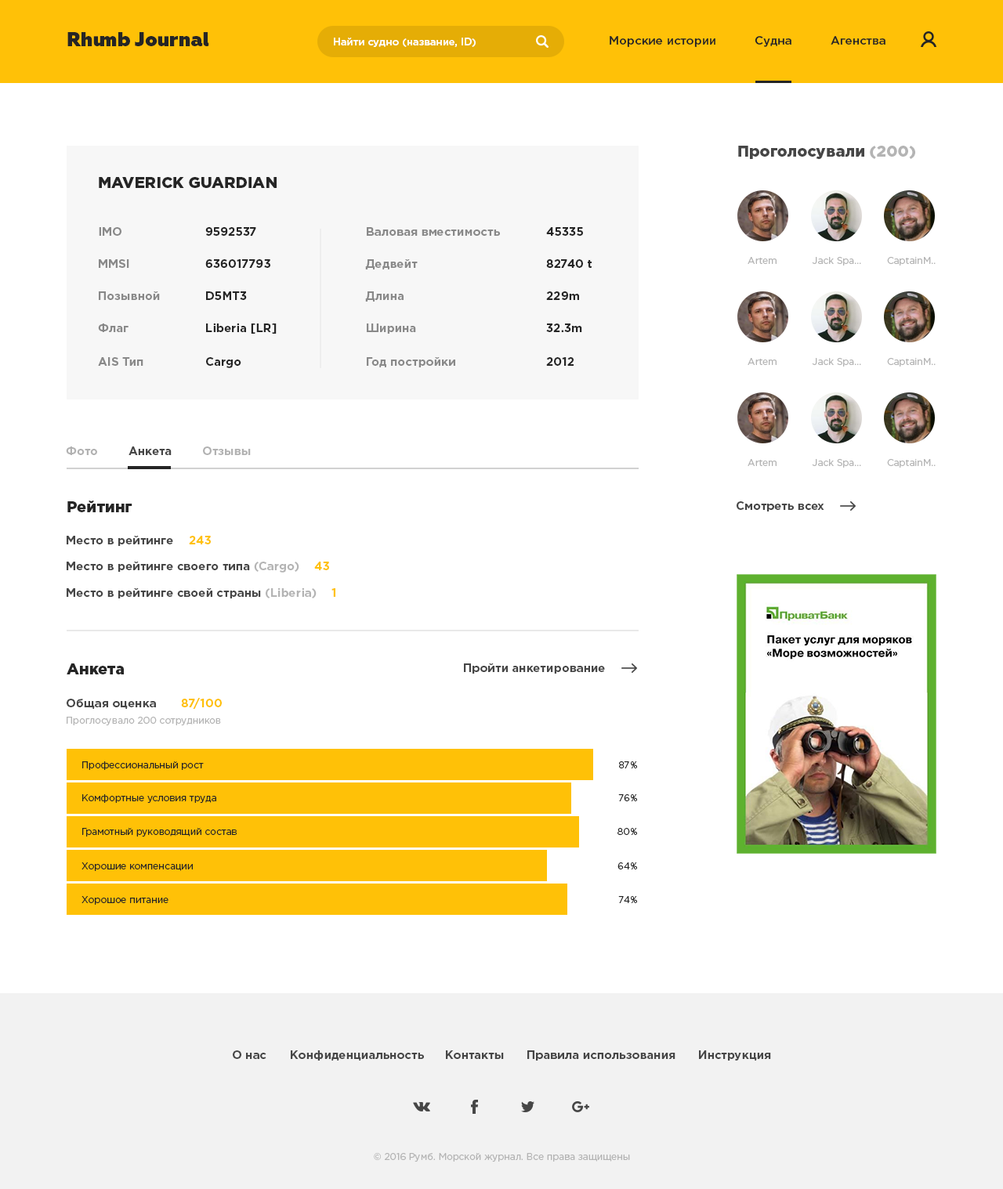
<style>
.page{position:relative;width:1003px;height:1189px;background:#ffffff}
.page>*{position:absolute;margin:0}
.t1{font:19.6px "Geometria-Heavy";color:#252525}
.t2{font:10.2px "GothamPro-Medium";color:#ffffff}
.t3{font:11.8px "GothamPro-Medium";color:#252525}
.t4{font:15.7px "GothamPro-Black";color:#464646}
.t5{font:15.7px "GothamPro-Black";color:#b4b4b4}
.t6{font:15.7px "GothamPro-Black";color:#252525}
.t7{font:11.8px "GothamPro-Bold";color:#898989}
.t8{font:11.8px "GothamPro-Bold";color:#252525}
.t9{font:9.4px "GothamPro";color:#b4b4b4}
.t10{font:11.8px "GothamPro-Bold";color:#b2b2b2}
.t11{font:11.8px "GothamPro-Bold";color:#464646}
.t12{font:11.8px "GothamPro-Bold";color:#ffc107}
.t13{font:11.8px "GothamPro-Bold";color:#b4b4b4}
.t14{font:9.4px "GothamPro";color:#252525}
</style>
<div class="page">
<p class="t1" style="left:67px;top:32px;width:142px;height:14px">Rhumb Journal</p>
<p class="t2" style="left:334px;top:38px;width:142px;height:9px">Найти судно (название, ID)</p>
<p class="t3" style="left:609px;top:36px;width:106px;height:11px">Морские истории</p>
<p class="t3" style="left:754px;top:36px;width:37px;height:11px">Судна</p>
<p class="t3" style="left:830px;top:36px;width:55px;height:9px">Агенства</p>
<p class="t4" style="left:738px;top:146px;width:177px;height:13px">Проголосували <span class="t5">(200)</span></p>
<p class="t6" style="left:99px;top:177px;width:178px;height:11px">MAVERICK GUARDIAN</p>
<p class="t7" style="left:99px;top:227px;width:22px;height:9px">IMO</p>
<p class="t8" style="left:205px;top:227px;width:51px;height:9px">9592537</p>
<p class="t7" style="left:367px;top:227px;width:133px;height:9px">Валовая вместимость</p>
<p class="t8" style="left:546px;top:227px;width:37px;height:9px">45335</p>
<p class="t9" style="left:747px;top:257px;width:29px;height:7px">Artem</p>
<p class="t9" style="left:812px;top:257px;width:49px;height:9px">Jack Spa...</p>
<p class="t9" style="left:887px;top:257px;width:48px;height:9px">CaptainM...</p>
<p class="t7" style="left:99px;top:259px;width:30px;height:9px">MMSI</p>
<p class="t8" style="left:205px;top:259px;width:65px;height:9px">636017793</p>
<p class="t7" style="left:365px;top:259px;width:53px;height:10px">Дедвейт</p>
<p class="t8" style="left:546px;top:259px;width:45px;height:9px">82740 t</p>
<p class="t7" style="left:99px;top:291px;width:61px;height:9px">Позывной</p>
<p class="t8" style="left:206px;top:291px;width:41px;height:9px">D5MT3</p>
<p class="t7" style="left:365px;top:291px;width:38px;height:11px">Длина</p>
<p class="t8" style="left:546px;top:291px;width:33px;height:9px">229m</p>
<p class="t7" style="left:98px;top:324px;width:30px;height:8px">Флаг</p>
<p class="t8" style="left:206px;top:324px;width:71px;height:10px">Liberia [LR]</p>
<p class="t7" style="left:367px;top:324px;width:49px;height:10px">Ширина</p>
<p class="t8" style="left:546px;top:324px;width:36px;height:8px">32.3m</p>
<p class="t7" style="left:98px;top:357px;width:45px;height:9px">AIS Тип</p>
<p class="t8" style="left:206px;top:357px;width:35px;height:11px">Cargo</p>
<p class="t7" style="left:367px;top:357px;width:88px;height:10px">Год постройки</p>
<p class="t8" style="left:546px;top:357px;width:27px;height:9px">2012</p>
<p class="t9" style="left:747px;top:358px;width:29px;height:7px">Artem</p>
<p class="t9" style="left:812px;top:358px;width:49px;height:9px">Jack Spa...</p>
<p class="t9" style="left:887px;top:358px;width:48px;height:9px">CaptainM...</p>
<p class="t10" style="left:66px;top:447px;width:31px;height:8px">Фото</p>
<p class="t11" style="left:128px;top:447px;width:44px;height:8px">Анкета</p>
<p class="t10" style="left:203px;top:447px;width:48px;height:8px">Отзывы</p>
<p class="t9" style="left:747px;top:459px;width:29px;height:7px">Artem</p>
<p class="t9" style="left:812px;top:459px;width:49px;height:9px">Jack Spa...</p>
<p class="t9" style="left:887px;top:459px;width:48px;height:9px">CaptainM...</p>
<p class="t6" style="left:67px;top:501px;width:65px;height:11px">Рейтинг</p>
<p class="t11" style="left:736px;top:501px;width:88px;height:11px">Смотреть всех</p>
<p class="t11" style="left:67px;top:536px;width:106px;height:10px">Место в рейтинге</p>
<p class="t12" style="left:189px;top:536px;width:22px;height:8px">243</p>
<p class="t11" style="left:67px;top:562px;width:232px;height:11px">Место в рейтинге своего типа <span class="t13">(Cargo)</span></p>
<p class="t12" style="left:314px;top:562px;width:15px;height:8px">43</p>
<p class="t11" style="left:67px;top:588px;width:249px;height:11px">Место в рейтинге своей страны <span class="t13">(Liberia)</span></p>
<p class="t12" style="left:331px;top:588px;width:4px;height:9px">1</p>
<p class="t6" style="left:67px;top:664px;width:57px;height:10px">Анкета</p>
<p class="t11" style="left:464px;top:664px;width:141px;height:10px">Пройти анкетирование</p>
<p class="t11" style="left:67px;top:699px;width:89px;height:10px">Общая оценка</p>
<p class="t12" style="left:181px;top:698px;width:41px;height:11px">87/100</p>
<p class="t9" style="left:67px;top:717px;width:154px;height:9px">Проглосувало 200 сотрудников</p>
<p class="t14" style="left:82px;top:761px;width:122px;height:9px">Профессиональный рост</p>
<p class="t14" style="left:619px;top:761px;width:18px;height:8px">87%</p>
<p class="t14" style="left:82px;top:794px;width:134px;height:10px">Комфортные условия труда</p>
<p class="t14" style="left:618px;top:794px;width:19px;height:7px">76%</p>
<p class="t14" style="left:82px;top:828px;width:155px;height:9px">Грамотный руководящий состав</p>
<p class="t14" style="left:617px;top:828px;width:20px;height:7px">80%</p>
<p class="t14" style="left:81px;top:863px;width:112px;height:8px">Хорошие компенсации</p>
<p class="t14" style="left:617px;top:863px;width:20px;height:7px">64%</p>
<p class="t14" style="left:81px;top:896px;width:87px;height:9px">Хорошое питание</p>
<p class="t14" style="left:618px;top:896px;width:19px;height:7px">74%</p>
<p class="t11" style="left:233px;top:1051px;width:33px;height:8px">О нас</p>
<p class="t11" style="left:291px;top:1051px;width:133px;height:10px">Конфиденциальность</p>
<p class="t11" style="left:446px;top:1051px;width:58px;height:8px">Контакты</p>
<p class="t11" style="left:527px;top:1051px;width:148px;height:10px">Правила использования</p>
<p class="t11" style="left:699px;top:1051px;width:72px;height:10px">Инструкция</p>
<p class="t9" style="left:374px;top:1153px;width:256px;height:10px">© 2016 Румб. Морской журнал. Все права защищены</p>
</div>
